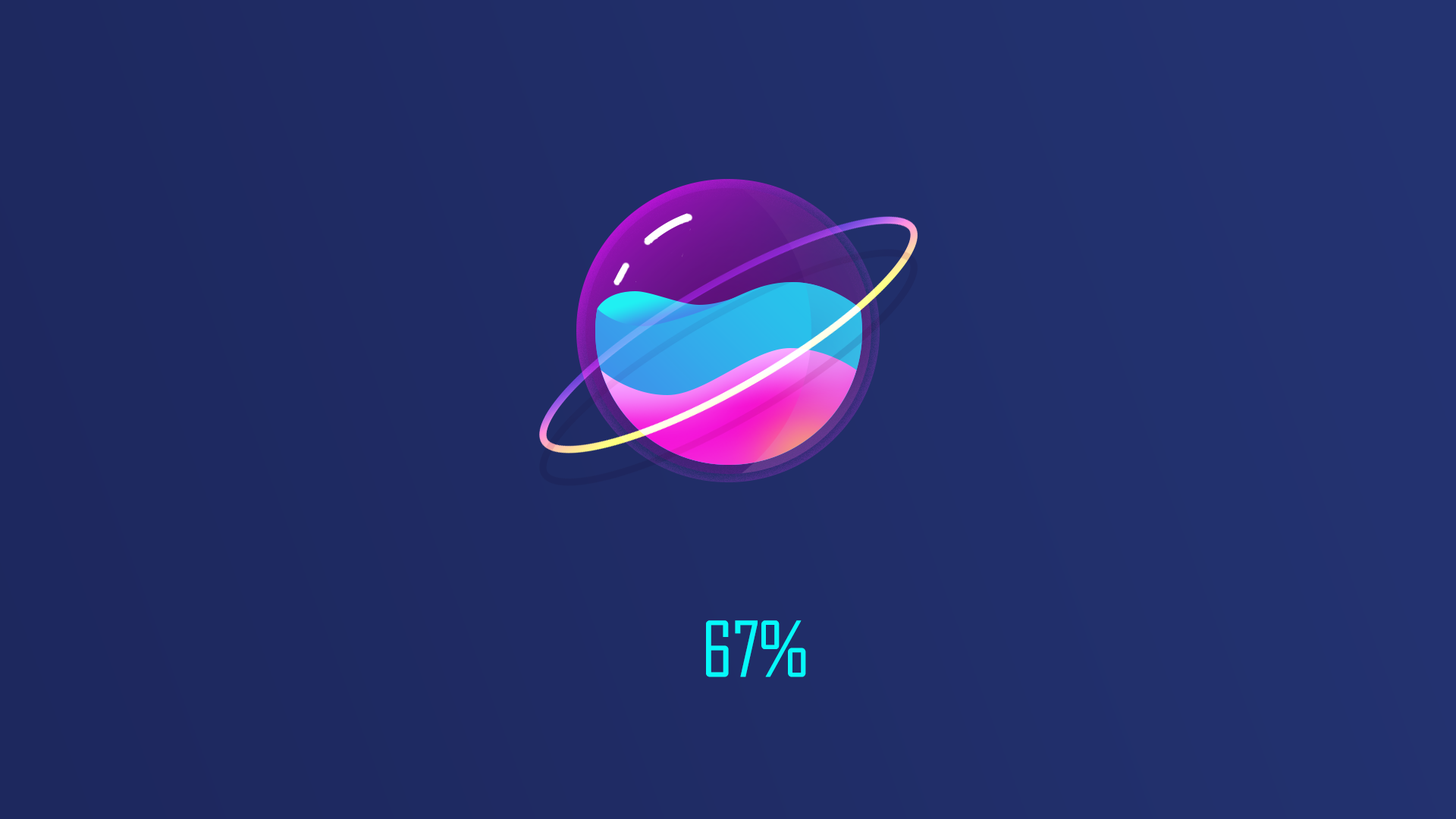
<style>
.page{position:relative;width:1456px;height:819px}
.page>*{position:absolute;margin:0}
.t1{font:17.6px "AgencyFB-Reg";color:#06f9fa}
</style>
<div class="page">
<p class="t1" style="left:706px;top:620px;width:100px;height:57px;text-align:center">67%</p>
</div>
